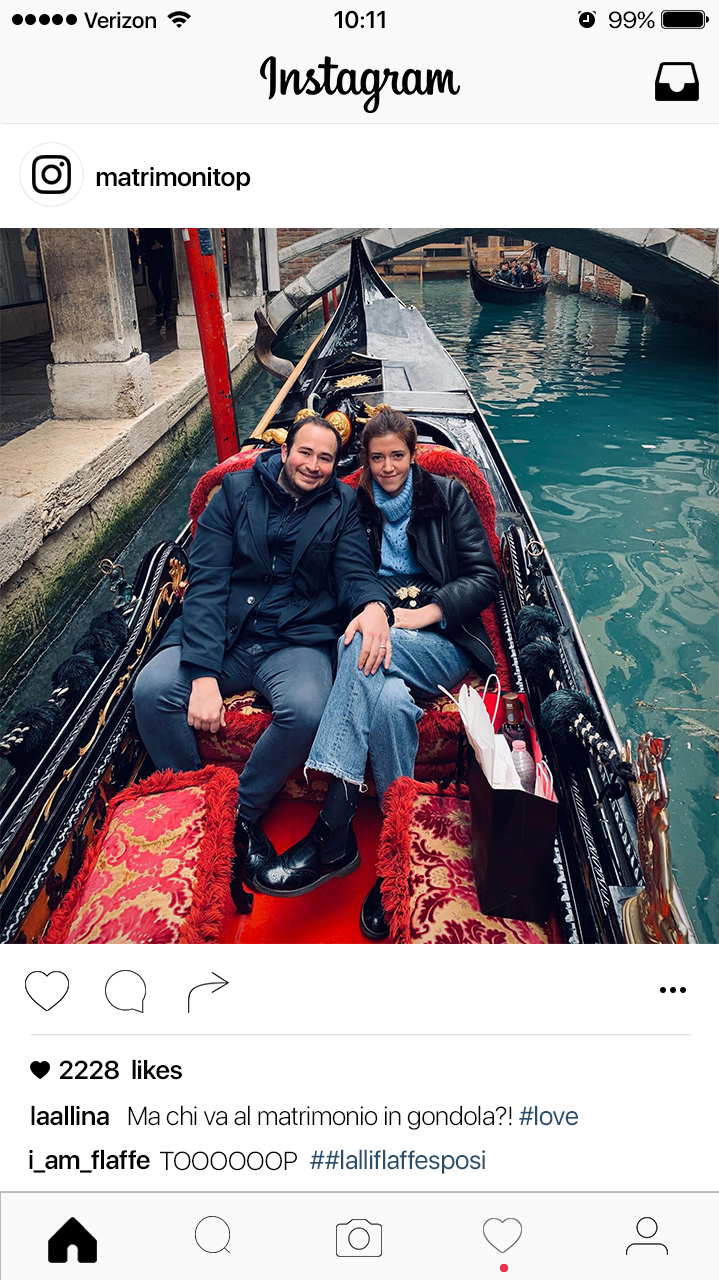
<style>
.page{position:relative;width:719px;height:1280px;background:#ffffff}
.page>*{position:absolute;margin:0}
.t1{font:22px "SFUIDisplay-Semibold";letter-spacing:-0.01em;color:#000000}
.t2{font:24px "SFUIDisplay-Semibold";letter-spacing:-0.01em;color:#000000}
.t3{font:23.2px "SFUIDisplay-Regular";letter-spacing:-0.01em;color:#000000;scale:1.07 1}
.t4{font:26px "SFUIDisplay-Semibold";letter-spacing:-0.01em;color:#000000}
.t5{font:26px "SFUIDisplay-Light";letter-spacing:-0.01em;color:#000000}
.t6{font:26px "SFUIDisplay-Regular";letter-spacing:-0.01em;color:#294d6c}
</style>
<div class="page">
<p class="t1" style="left:84px;top:11px;width:72px;height:18px">Verizon</p>
<p class="t2" style="left:334px;top:10px;width:51px;height:19px">10:11</p>
<p class="t3" style="left:609px;top:11px;width:46px;height:18px">99%</p>
<p class="t4" style="left:96px;top:167px;width:155px;height:24px">matrimonitop</p>
<p class="t4" style="left:59px;top:1059px;width:123px;height:21px">2228  likes</p>
<p class="t4" style="left:31px;top:1105px;width:78px;height:21px">laallina</p>
<p class="t5" style="left:128px;top:1105px;width:384px;height:25px">Ma chi va al matrimonio in gondola?!</p>
<p class="t6" style="left:519px;top:1105px;width:59px;height:21px">#love</p>
<p class="t4" style="left:29px;top:1149px;width:121px;height:24px">i_am_flaffe</p>
<p class="t5" style="left:160px;top:1151px;width:137px;height:20px">TOOOOOOP</p>
<p class="t6" style="left:310px;top:1149px;width:175px;height:25px">##lalliflaffesposi</p>
</div>
